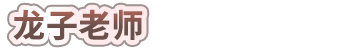
<style>
.page{position:relative;width:360px;height:50px;background:#ffffff}
.page>*{position:absolute;margin:0}
.t1{font:32px "SourceHanSansSC-Bold";color:#73534d;font-weight:bold}
</style>
<div class="page">
<p class="t1" style="left:13px;top:9px;width:130px;height:32px">龙子老师</p>
</div>
